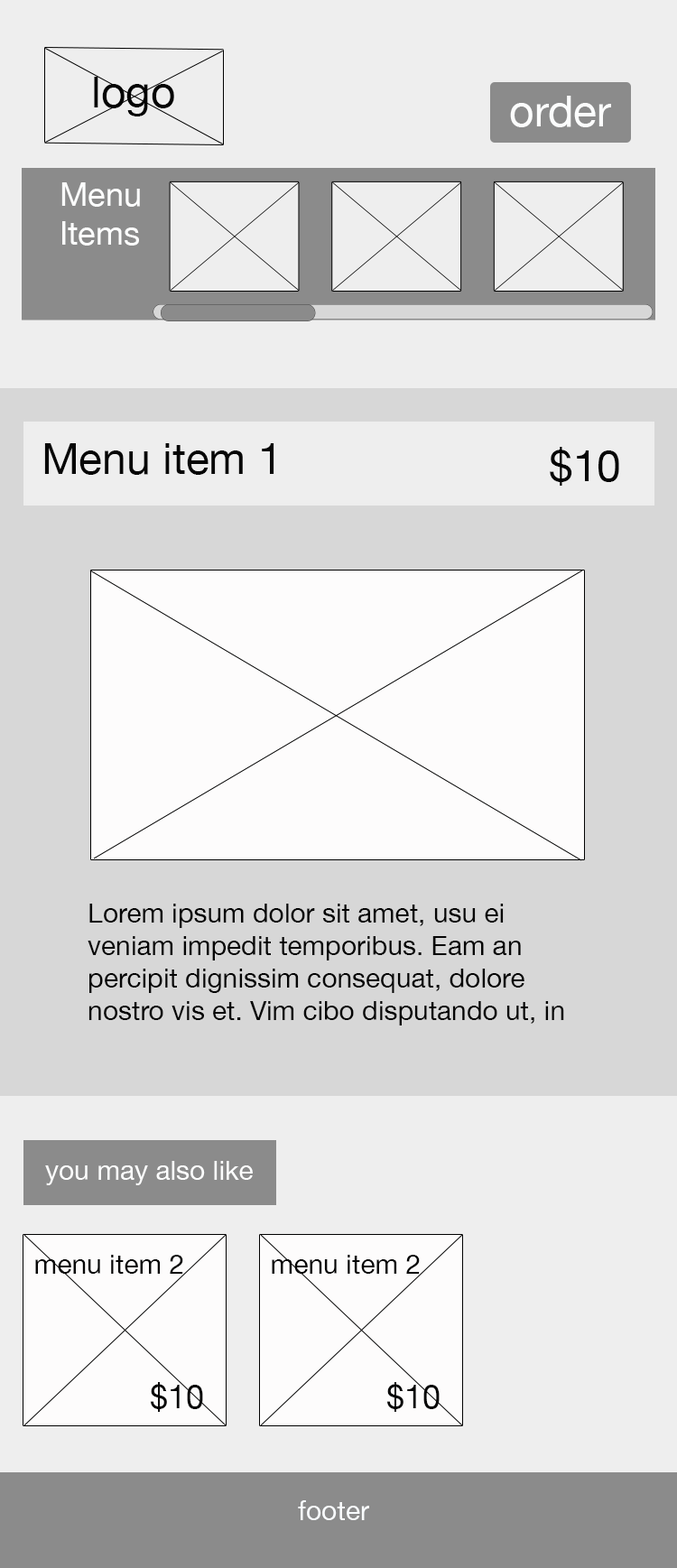
<style>
.page{position:relative;width:677px;height:1568px;background:#eeeeee}
.page>*{position:absolute;margin:0}
.t1{font:43.3px "HelveticaNeue";color:#030303}
.t2{font:43.3px "HelveticaNeue";color:#fcfdfd}
.t3{font:32.7px "HelveticaNeue";color:#fcfdfd}
.t4{font:43.3px "HelveticaNeue";color:#060606}
.t5{font:43.3px "HelveticaNeue";color:#050505}
.t6{font:27.1px "HelveticaNeue";color:#050505}
.t7{font:27.1px "HelveticaNeue";color:#fcfdfd}
.t8{font:32.5px "HelveticaNeue";color:#050505}
.t9{font:27.1px "HelveticaNeue";color:#f9fcfe}
</style>
<div class="page">
<p class="t1" style="left:94px;top:77px;width:80px;height:39px">logo</p>
<p class="t2" style="left:510px;top:96px;width:101px;height:31px">order</p>
<p class="t3" style="left:61px;top:182px;width:79px;height:64px">Menu Items</p>
<p class="t4" style="left:44px;top:443px;width:230px;height:32px">Menu item 1</p>
<p class="t5" style="left:550px;top:447px;width:69px;height:39px">$10</p>
<p class="t6" style="left:88px;top:904px;width:476px;height:121px">Lorem ipsum dolor sit amet, usu ei veniam impedit temporibus. Eam an percipit dignissim consequat, dolore nostro vis et. Vim cibo disputando ut, in pri quidam integre tincidunt. Elit porro ad mel, mel ne harum option iisque, sed feugait tacimates ea.</p>
<p class="t7" style="left:45px;top:1161px;width:208px;height:24px">you may also like</p>
<p class="t6" style="left:35px;top:1255px;width:148px;height:19px">menu item 2</p>
<p class="t6" style="left:272px;top:1255px;width:148px;height:19px">menu item 2</p>
<p class="t8" style="left:150px;top:1382px;width:53px;height:30px">$10</p>
<p class="t8" style="left:386px;top:1382px;width:54px;height:30px">$10</p>
<p class="t9" style="left:298px;top:1500px;width:71px;height:20px">footer</p>
</div>
